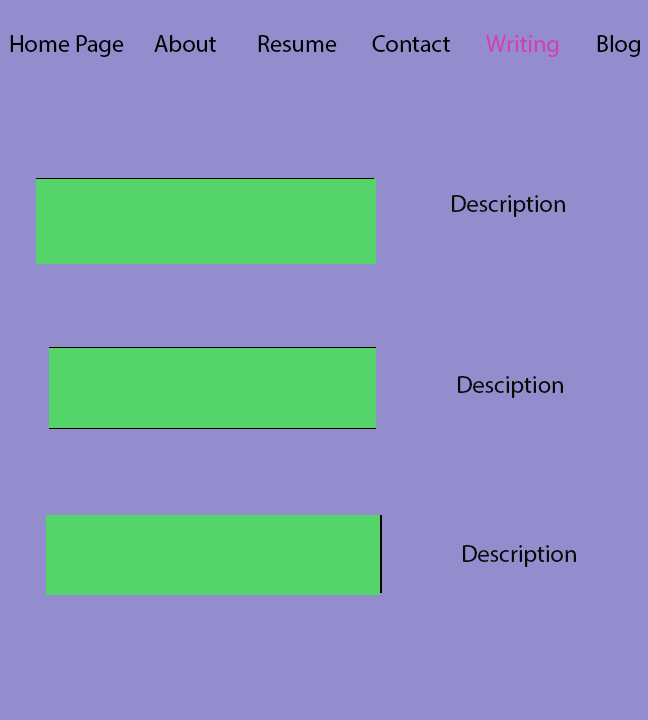
<style>
.page{position:relative;width:648px;height:720px;background:#938dcd}
.page>*{position:absolute;margin:0}
.t1{font:24px "MyriadPro-Regular";color:#000000}
.t2{font:24px "MyriadPro-Regular";color:#d13eb7}
.t3{font:24px "MyriadPro-Regular";color:#010c03}
</style>
<div class="page">
<p class="t1" style="left:10px;top:35px;width:114px;height:22px">Home Page</p>
<p class="t1" style="left:154px;top:35px;width:62px;height:17px">About</p>
<p class="t1" style="left:258px;top:35px;width:79px;height:17px">Resume</p>
<p class="t1" style="left:372px;top:35px;width:78px;height:17px">Contact</p>
<p class="t2" style="left:486px;top:35px;width:73px;height:22px">Writing</p>
<p class="t1" style="left:597px;top:35px;width:43px;height:22px">Blog</p>
<p class="t3" style="left:452px;top:195px;width:113px;height:22px">Description</p>
<p class="t3" style="left:458px;top:376px;width:105px;height:22px">Desciption</p>
<p class="t3" style="left:463px;top:545px;width:113px;height:22px">Description</p>
</div>
